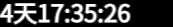
<style>
.page{position:relative;width:173px;height:27px;background:#000000}
.page>*{position:absolute;margin:0}
.t1{font:24px "WebPSD-18463539-0-Regular";color:#ffffff;font-weight:bold}
</style>
<div class="page">
<p class="t1" style="left:0px;top:0px;width:173px;height:27px">4天17:35:26</p>
</div>
